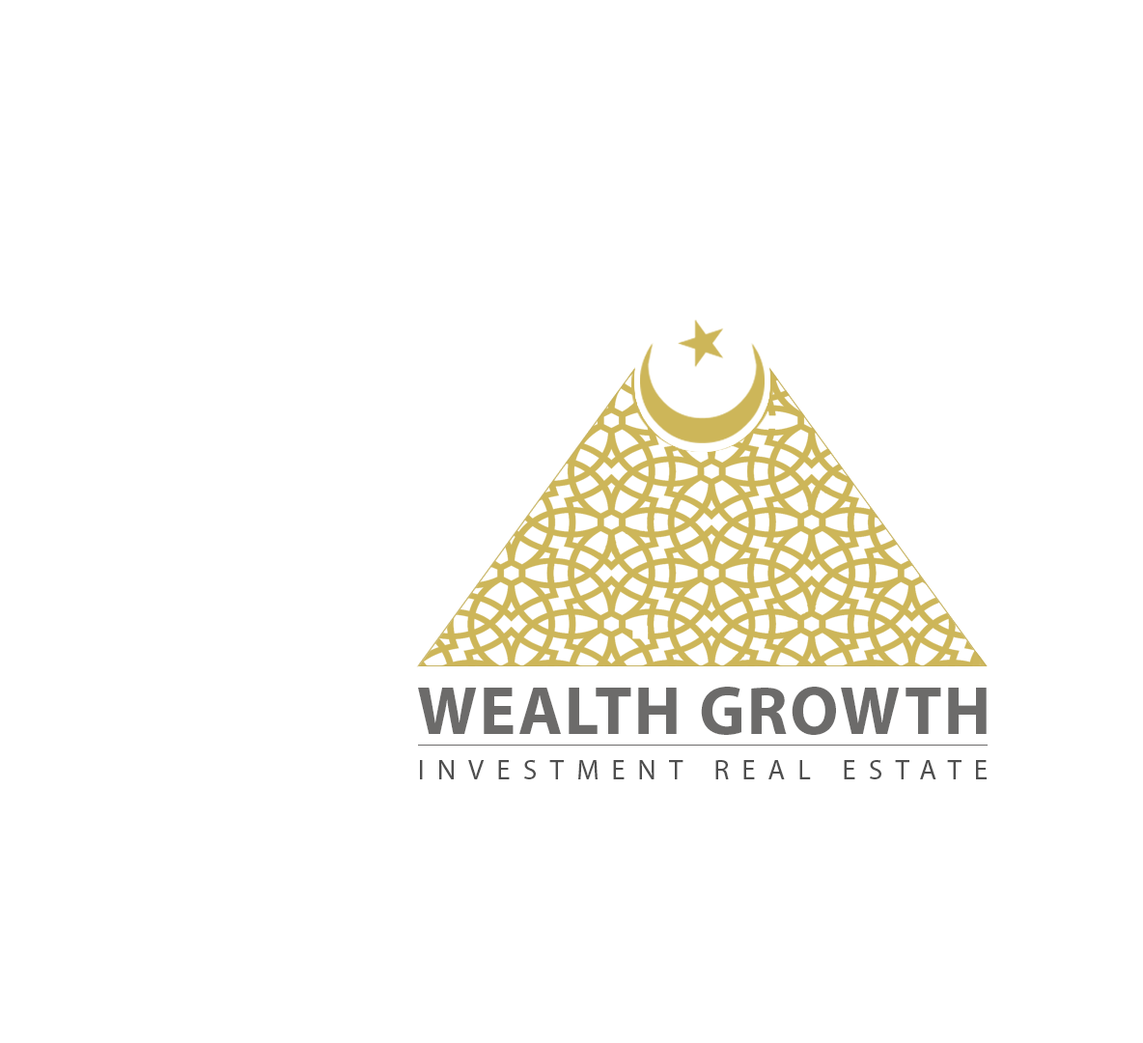
<style>
.page{position:relative;width:1143px;height:1043px;background:#ffffff}
.page>*{position:absolute;margin:0}
.t1{font:69.2px "MyriadPro-Bold";letter-spacing:0.035em;color:#6c6b6a}
.t2{font:28.8px "MyriadPro-Regular";letter-spacing:0.45em;color:#4e4e4e}
</style>
<div class="page">
<p class="t1" style="left:418px;top:687px;width:569px;height:48px">WEALTH GROWTH</p>
<p class="t2" style="left:420px;top:760px;width:567px;height:19px">INVESTMENT REAL ESTATE</p>
</div>
